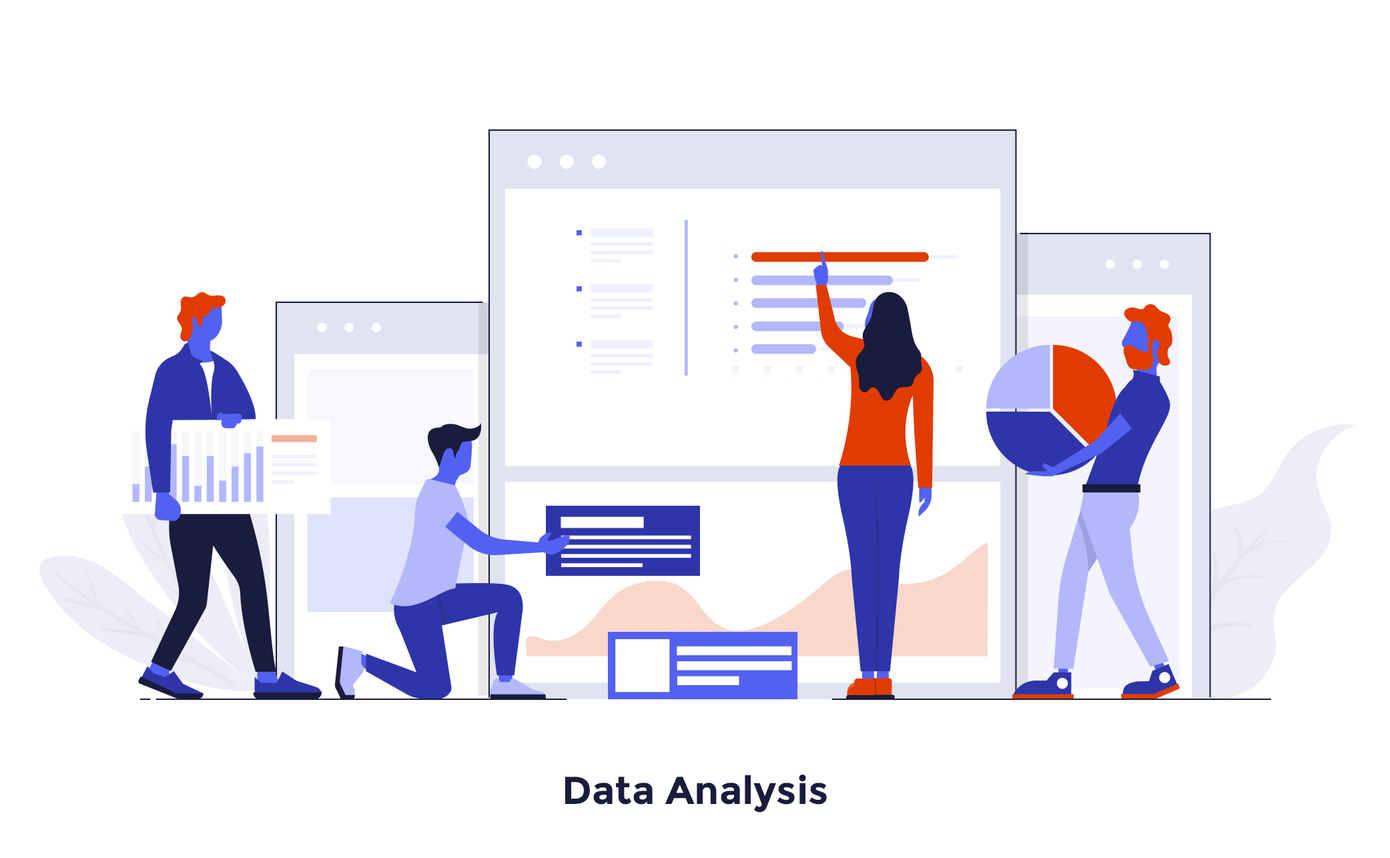
<style>
.page{position:relative;width:1390px;height:858px;background:#ffffff}
.page>*{position:absolute;margin:0}
.t1{font:38.9px "Montserrat-Bold";color:#191c3c}
</style>
<div class="page">
<p class="t1" style="left:565px;top:775px;width:262px;height:38px">Data Analysis</p>
</div>
